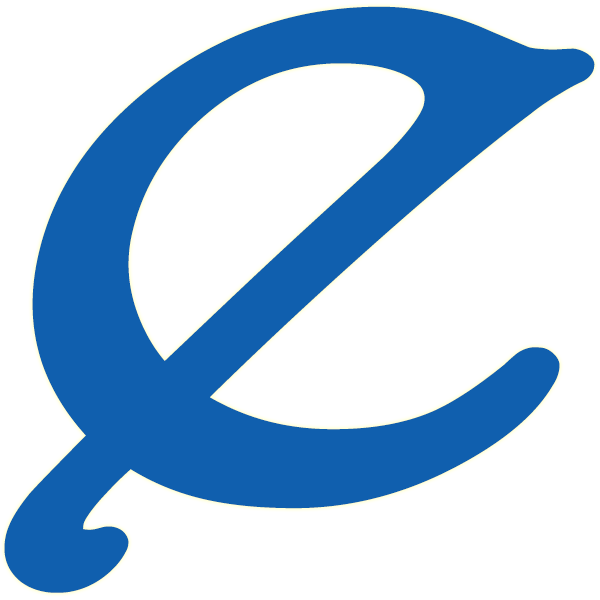
<style>
.page{position:relative;width:600px;height:600px;background:#ffffff}
.page>*{position:absolute;margin:0}
.t1{font:952.9px "Harrington";color:#105fae;font-weight:bold;font-style:italic;scale:1.24 1}
</style>
<div class="page">
<p class="t1" style="left:4px;top:6px;width:591px;height:587px">e</p>
</div>
